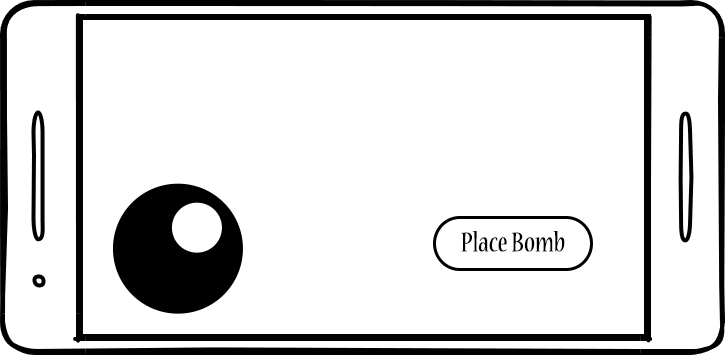
<style>
.page{position:relative;width:725px;height:356px;background:#ffffff}
.page>*{position:absolute;margin:0}
.t1{font:30px "NuevaStd-Cond";color:#000000}
</style>
<div class="page">
<p class="t1" style="left:461px;top:231px;width:104px;height:21px">Place Bomb</p>
</div>
